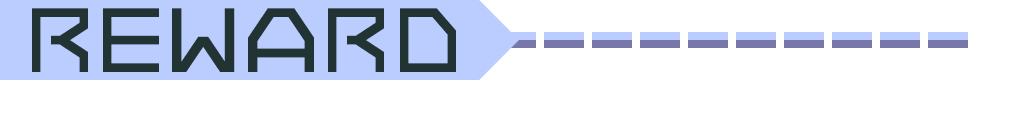
<style>
.page{position:relative;width:1024px;height:128px;background:#ffffff}
.page>*{position:absolute;margin:0}
.t1{font:71.7px "7THDR2020ThinRegular";letter-spacing:0.08em;color:#223333;text-transform:uppercase;font-weight:bold;scale:0.96 1}
.t2{font:71.7px "7THDR2020ThinRegular";letter-spacing:0.13em;color:#223333;text-transform:uppercase;font-weight:bold;scale:0.87 1}
.t3{font:71.7px "7THDR2020ThinRegular";letter-spacing:0.09em;color:#223333;text-transform:uppercase;font-weight:bold;scale:0.87 1}
</style>
<div class="page">
<p class="t1" style="left:32px;top:8px;width:424px;height:64px"><span class="t2">R</span><span class="t3">E</span>WA<span class="t2">RD</span></p>
</div>
